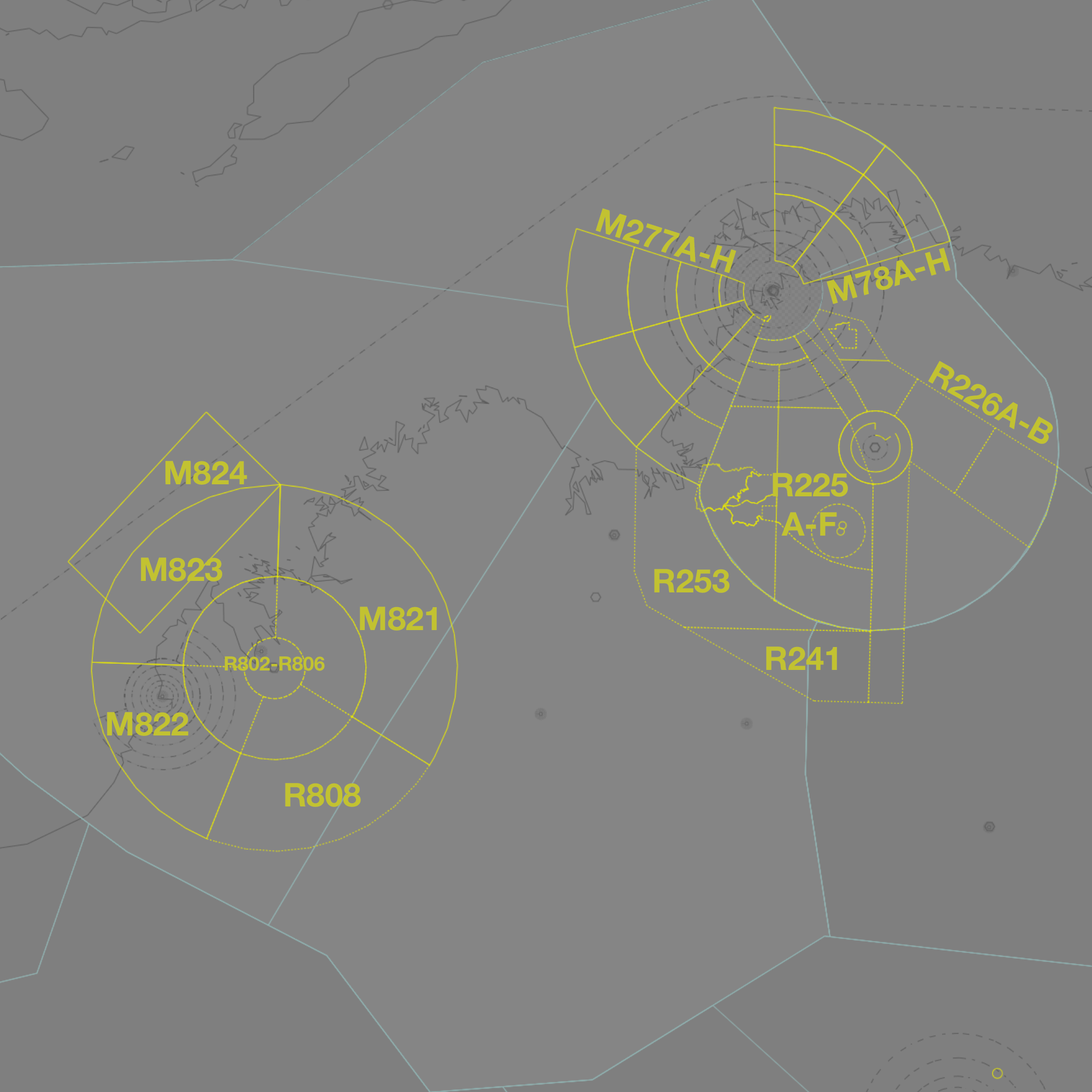
<style>
.page{position:relative;width:1092px;height:1092px;background:#858585}
.page>*{position:absolute;margin:0}
.t1{font:32.8px "HelveticaNeue-Bold";color:#c2c231}
.t2{font:19.7px "HelveticaNeue-Bold";color:#c2c231}
</style>
<div class="page">
<p class="t1" style="left:596px;top:208px;width:141px;height:66px;rotate:18deg">M277A-H</p>
<p class="t1" style="left:827px;top:247px;width:124px;height:57px;rotate:-16deg">M78A-H</p>
<p class="t1" style="left:928px;top:361px;width:125px;height:83px;rotate:29deg">R226A-B</p>
<p class="t1" style="left:165px;top:461px;width:82px;height:24px">M824</p>
<p class="t1" style="left:773px;top:473px;width:75px;height:63px;text-align:center">R225<br>A-F</p>
<p class="t1" style="left:141px;top:557px;width:81px;height:24px">M823</p>
<p class="t1" style="left:654px;top:569px;width:75px;height:24px">R253</p>
<p class="t1" style="left:360px;top:607px;width:77px;height:24px">M821</p>
<p class="t1" style="left:766px;top:646px;width:71px;height:24px">R241</p>
<p class="t2" style="left:224px;top:656px;width:101px;height:15px">R802-R806</p>
<p class="t1" style="left:107px;top:712px;width:81px;height:24px">M822</p>
<p class="t1" style="left:285px;top:783px;width:76px;height:24px">R808</p>
</div>
